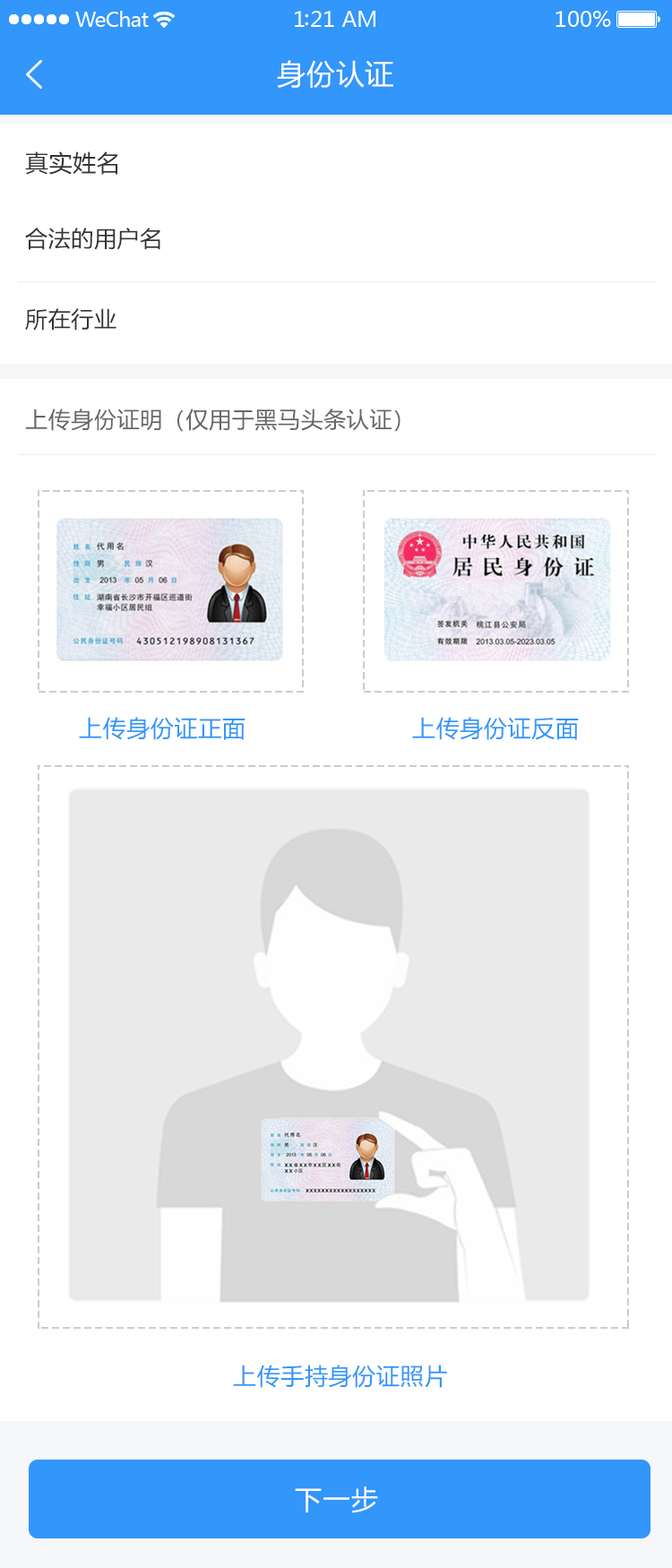
<style>
.page{position:relative;width:672px;height:1568px;background:#ffffff}
.page>*{position:absolute;margin:0}
.t1{font:28.7px "MicrosoftYaHei";letter-spacing:0.025em;color:#ffffff}
.t2{font:23.3px "MicrosoftYaHei";letter-spacing:0.025em;color:#333333}
.t3{font:22.4px "MicrosoftYaHei";letter-spacing:0.025em;color:#333333}
.t4{font:22.4px "MicrosoftYaHei";letter-spacing:0.025em;color:#666666}
.t5{font:23.3px "MicrosoftYaHei";letter-spacing:0.025em;color:#3296fa}
.t6{font:26.9px "MicrosoftYaHei";letter-spacing:0.05em;color:#ffffff}
</style>
<div class="page">
<p class="t1" style="left:277px;top:60px;width:116px;height:28px">身份认证</p>
<p class="t1" style="left:277px;top:60px;width:116px;height:28px">身份认证</p>
<p class="t2" style="left:25px;top:151px;width:92px;height:24px">真实姓名</p>
<p class="t3" style="left:25px;top:228px;width:135px;height:22px">合法的用户名</p>
<p class="t3" style="left:25px;top:308px;width:91px;height:23px">所在行业</p>
<p class="t4" style="left:25px;top:409px;width:376px;height:23px">上传身份证明（仅用于黑马头条认证）</p>
<p class="t5" style="left:79px;top:717px;width:167px;height:23px">上传身份证正面</p>
<p class="t5" style="left:412px;top:717px;width:167px;height:23px">上传身份证反面</p>
<p class="t5" style="left:233px;top:1365px;width:214px;height:23px">上传手持身份证照片</p>
<p class="t6" style="left:295px;top:1486px;width:83px;height:27px">下一步</p>
</div>
